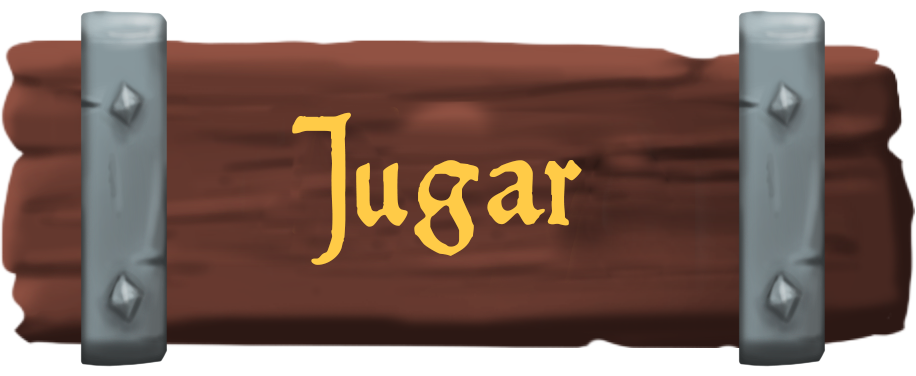
<style>
.page{position:relative;width:916px;height:376px}
.page>*{position:absolute;margin:0}
.t1{font:124px "HamletOrNot";color:#ffcb47}
</style>
<div class="page">
<p class="t1" style="left:292px;top:112px;width:290px;height:153px">Jugar</p>
</div>
